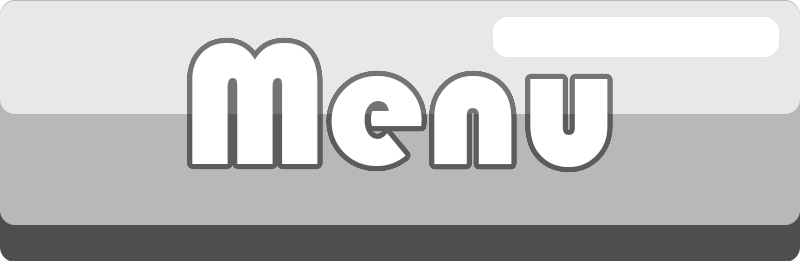
<style>
.page{position:relative;width:800px;height:261px;background:#b8b8b8}
.page>*{position:absolute;margin:0}
.t1{font:177px "Bauhaus93";color:#ffffff}
</style>
<div class="page">
<p class="t1" style="left:192px;top:43px;width:416px;height:124px">Menu</p>
</div>
